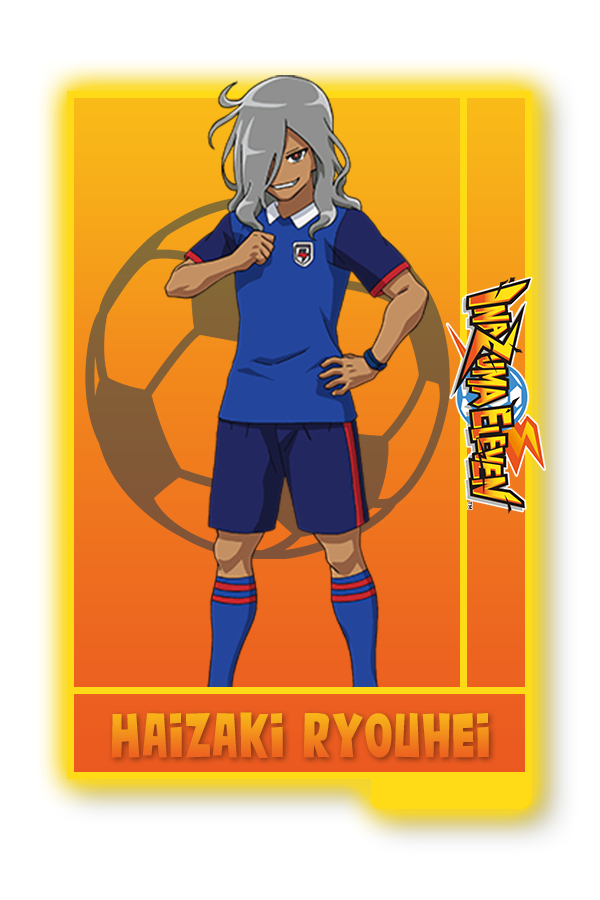
<style>
.page{position:relative;width:600px;height:900px;background:#ffffff}
.page>*{position:absolute;margin:0}
.t1{font:65.2px "TTG-Bold"}
</style>
<div class="page">
<p class="t1" style="left:111px;top:712px;width:378px;height:46px">Haizaki Ryouhei</p>
</div>
